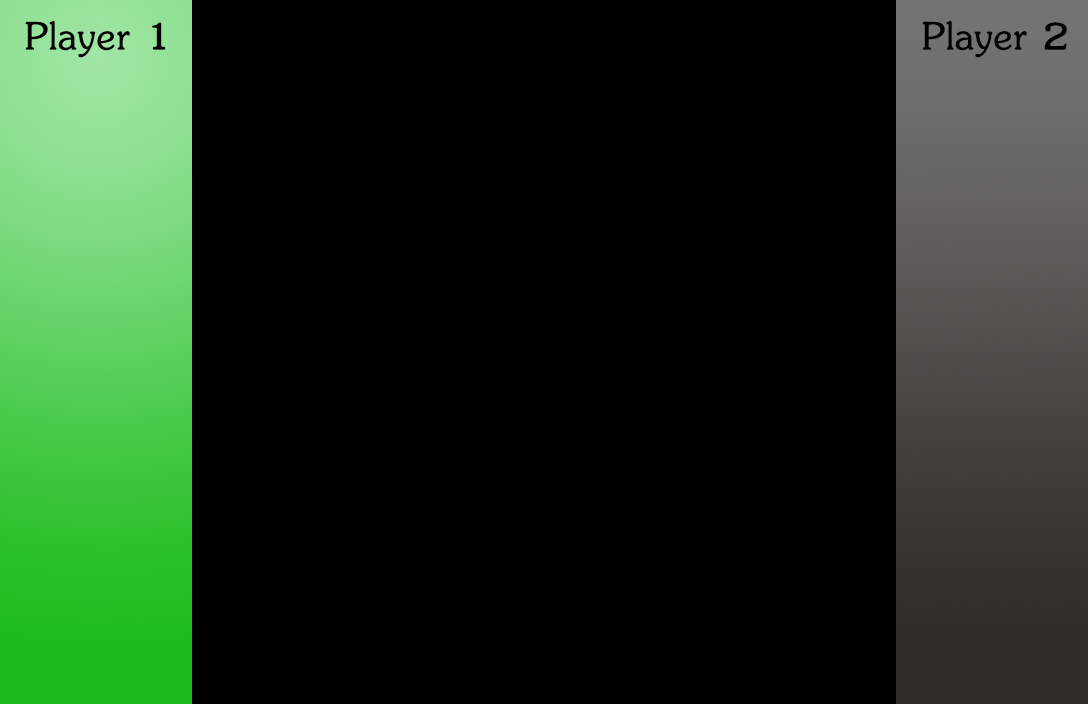
<style>
.page{position:relative;width:1088px;height:704px;background:#000000}
.page>*{position:absolute;margin:0}
.t1{font:60px "JasmineUPC";letter-spacing:-0.01em;color:#000000;font-weight:bold}
</style>
<div class="page">
<p class="t1" style="left:25px;top:20px;width:141px;height:38px">Player 1</p>
<p class="t1" style="left:922px;top:20px;width:145px;height:38px">Player 2</p>
</div>
